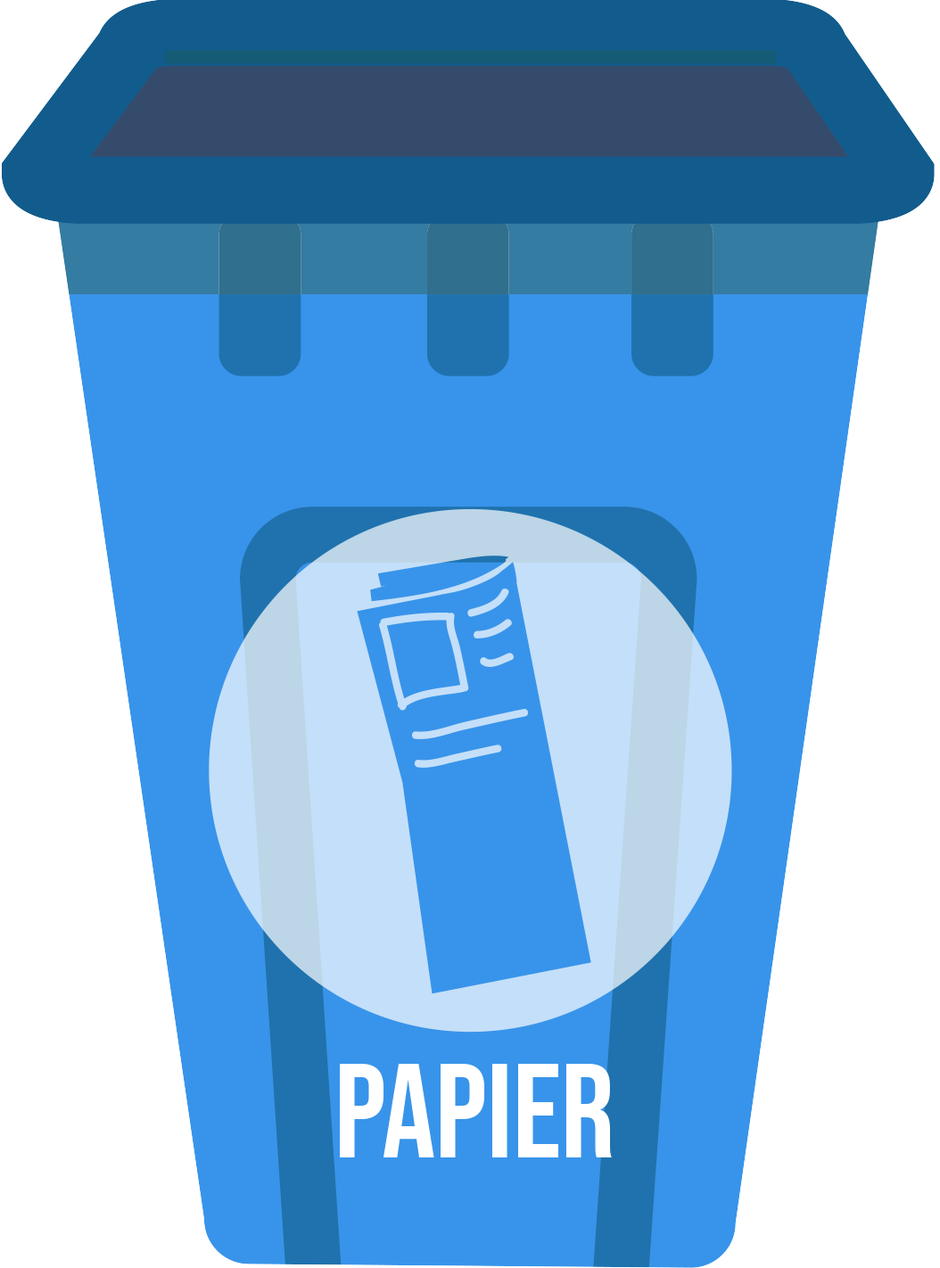
<style>
.page{position:relative;width:940px;height:1268px;background:#3894ea}
.page>*{position:absolute;margin:0}
.t1{font:133.8px "BebasNeue-Regular";color:#ffffff}
</style>
<div class="page">
<p class="t1" style="left:340px;top:1064px;width:272px;height:94px">PAPIER</p>
</div>
